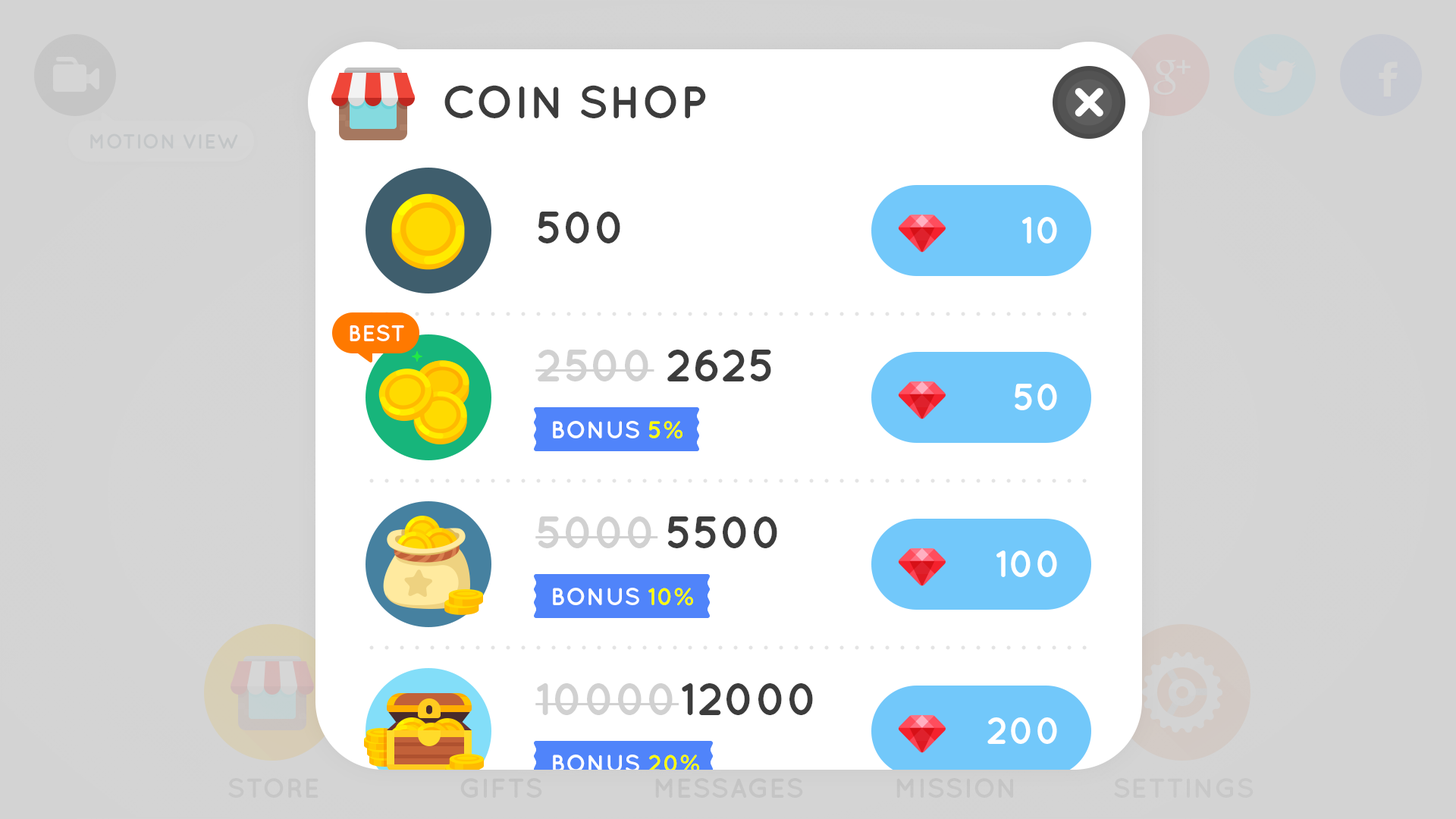
<style>
.page{position:relative;width:1456px;height:819px;background:#ffffff}
.page>*{position:absolute;margin:0}
.t1{font:45.5px "Quicksand-Bold";color:#3c3c3c;text-transform:uppercase}
.t2{font:45.5px "Quicksand-Bold";color:#3c3c3c}
.t3{font:37.9px "Quicksand-Bold";color:#ffffff}
.t4{font:22.7px "Quicksand-Bold";color:#ffffff;text-transform:uppercase}
.t5{font:45.5px "Quicksand-Bold";color:#d1d1d1}
.t6{font:24.3px "Quicksand-Bold";color:#ffffff;text-transform:uppercase}
.t7{font:24.3px "Quicksand-Bold";color:#fffd00;text-transform:uppercase}
</style>
<div class="page">
<p class="t1" style="left:444px;top:85px;width:262px;height:33px">Coin SHOP</p>
<p class="t2" style="left:538px;top:212px;width:82px;height:31px">500</p>
<p class="t3" style="left:1022px;top:217px;width:35px;height:26px">10</p>
<p class="t4" style="left:350px;top:325px;width:54px;height:16px">BEST</p>
<p class="t5" style="left:535px;top:350px;width:119px;height:31px">2500</p>
<p class="t2" style="left:667px;top:350px;width:104px;height:31px">2625</p>
<p class="t3" style="left:1015px;top:384px;width:42px;height:26px">50</p>
<p class="t6" style="left:553px;top:421px;width:129px;height:18px">Bonus <span class="t7">5%</span></p>
<p class="t5" style="left:535px;top:516px;width:123px;height:32px">5000</p>
<p class="t2" style="left:668px;top:516px;width:109px;height:32px">5500</p>
<p class="t3" style="left:996px;top:551px;width:61px;height:26px">100</p>
<p class="t6" style="left:553px;top:588px;width:140px;height:18px">Bonus <span class="t7">10%</span></p>
<p class="t5" style="left:535px;top:683px;width:144px;height:32px">10000</p>
<p class="t2" style="left:682px;top:683px;width:131px;height:32px">12000</p>
<p class="t3" style="left:987px;top:717px;width:70px;height:27px">200</p>
<p class="t6" style="left:553px;top:755px;width:146px;height:18px">Bonus <span class="t7">20%</span></p>
</div>
